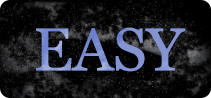
<style>
.page{position:relative;width:211px;height:98px}
.page>*{position:absolute;margin:0}
.t1{font:60px "Georgia";color:#8494d3}
</style>
<div class="page">
<p class="t1" style="left:36px;top:27px;width:150px;height:45px">EASY</p>
</div>
